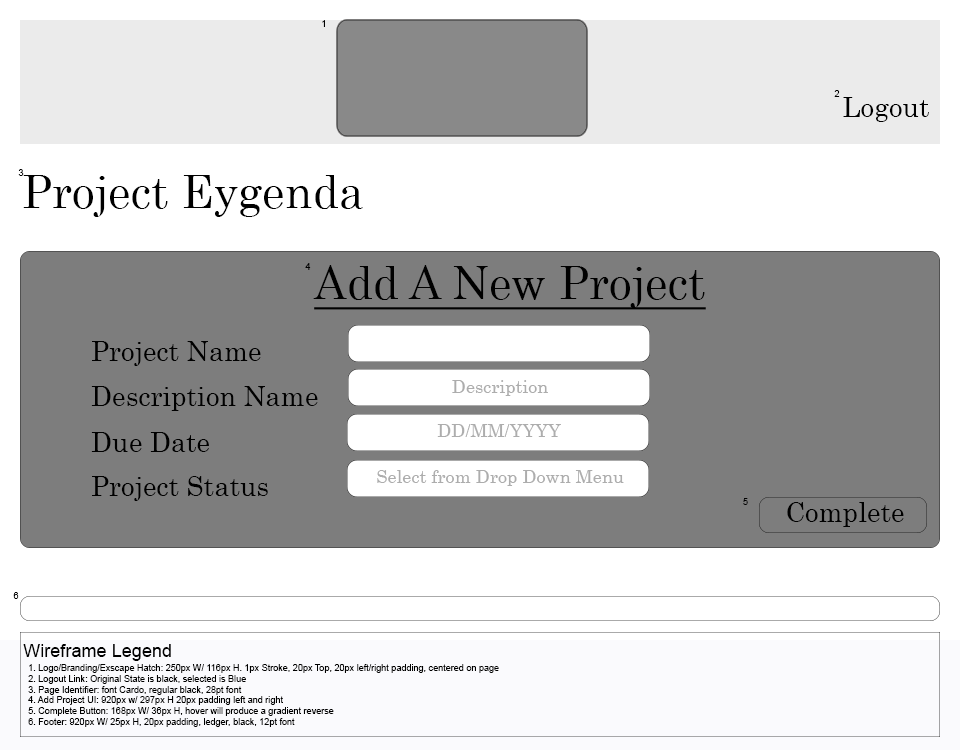
<style>
.page{position:relative;width:960px;height:750px;background:#ffffff}
.page>*{position:absolute;margin:0}
.t1{font:9.1px "ArialMT";color:#000000}
.t2{font:27.2px "Century";color:#000000}
.t3{font:45.3px "Century";color:#000000}
.t4{font:45.3px "Century";color:#000000;text-decoration:underline}
.t5{font:18.1px "Century";color:#adadad}
.t6{font:18.1px "ArialMT";color:#000000}
</style>
<div class="page">
<p class="t1" style="left:322px;top:20px;width:3px;height:7px">1</p>
<p class="t1" style="left:834px;top:90px;width:6px;height:7px">2</p>
<p class="t2" style="left:843px;top:97px;width:86px;height:25px">Logout</p>
<p class="t1" style="left:18px;top:169px;width:6px;height:7px">3</p>
<p class="t3" style="left:23px;top:175px;width:340px;height:42px">Project Eygenda</p>
<p class="t1" style="left:305px;top:263px;width:6px;height:7px">4</p>
<p class="t4" style="left:313px;top:265px;width:393px;height:45px">Add A New Project</p>
<p class="t2" style="left:92px;top:341px;width:169px;height:25px">Project Name</p>
<p class="t2" style="left:91px;top:386px;width:227px;height:25px">Description Name</p>
<p class="t5" style="left:452px;top:380px;width:96px;height:16px">Description</p>
<p class="t5" style="left:437px;top:424px;width:124px;height:13px">DD/MM/YYYY</p>
<p class="t2" style="left:91px;top:432px;width:118px;height:20px">Due Date</p>
<p class="t5" style="left:377px;top:470px;width:247px;height:16px">Select from Drop Down Menu</p>
<p class="t2" style="left:92px;top:476px;width:176px;height:25px">Project Status</p>
<p class="t1" style="left:743px;top:498px;width:5px;height:7px">5</p>
<p class="t2" style="left:787px;top:502px;width:117px;height:25px">Complete</p>
<p class="t1" style="left:13px;top:592px;width:6px;height:7px">6</p>
<p class="t6" style="left:23px;top:644px;width:148px;height:17px">Wireframe Legend</p>
<p class="t1" style="left:28px;top:664px;width:471px;height:63px">1. Logo/Branding/Exscape Hatch: 250px W/ 116px H. 1px Stroke, 20px Top, 20px left/right padding, centered on page<br>2. Logout Link: Original State is black, selected is Blue<br>3. Page Identifier: font Cardo, regular black, 28pt font<br>4. Add Project UI: 920px w/ 297px H 20px padding left and right <br>5. Complete Button: 168px W/ 36px H, hover will produce a gradient reverse<br>6. Footer: 920px W/ 25px H, 20px padding, ledger, black, 12pt font</p>
</div>
